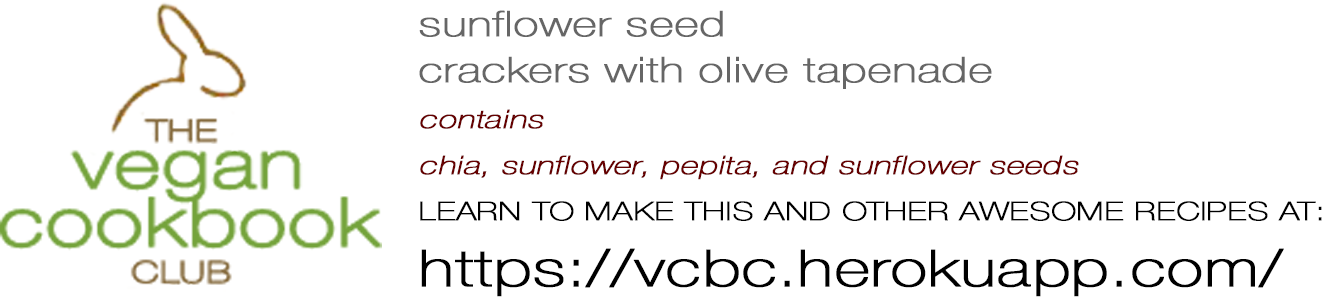
<style>
.page{position:relative;width:1322px;height:297px;background:#ffffff}
.page>*{position:absolute;margin:0}
.t1{font:25.7px/45.8px "HelveticaNeue-Thin";color:#660000;font-weight:bold;font-style:italic;scale:1.3 1}
.t2{font:35.3px/45.8px "HelveticaNeue-Thin";color:#666666;font-weight:bold;scale:1.3 1}
.t3{font:25.7px/45.8px "HelveticaNeue-Thin";color:#000000;font-weight:bold;scale:1.3 1}
.t4{font:51.3px/66.7px "HelveticaNeue-Thin";color:#000000;font-weight:bold;scale:1.3 1}
</style>
<div class="page">
<p class="t1" style="left:419px;top:10px;width:903px;height:287px"><span class="t2">sunflower seed<br>crackers with olive tapenade<br></span>contains<br>chia, sunflower, pepita, and sunflower seeds<br><span class="t3">LEARN TO MAKE THIS AND OTHER AWESOME RECIPES AT:<br></span><span class="t4">https://vcbc.herokuapp.com/</span></p>
</div>
